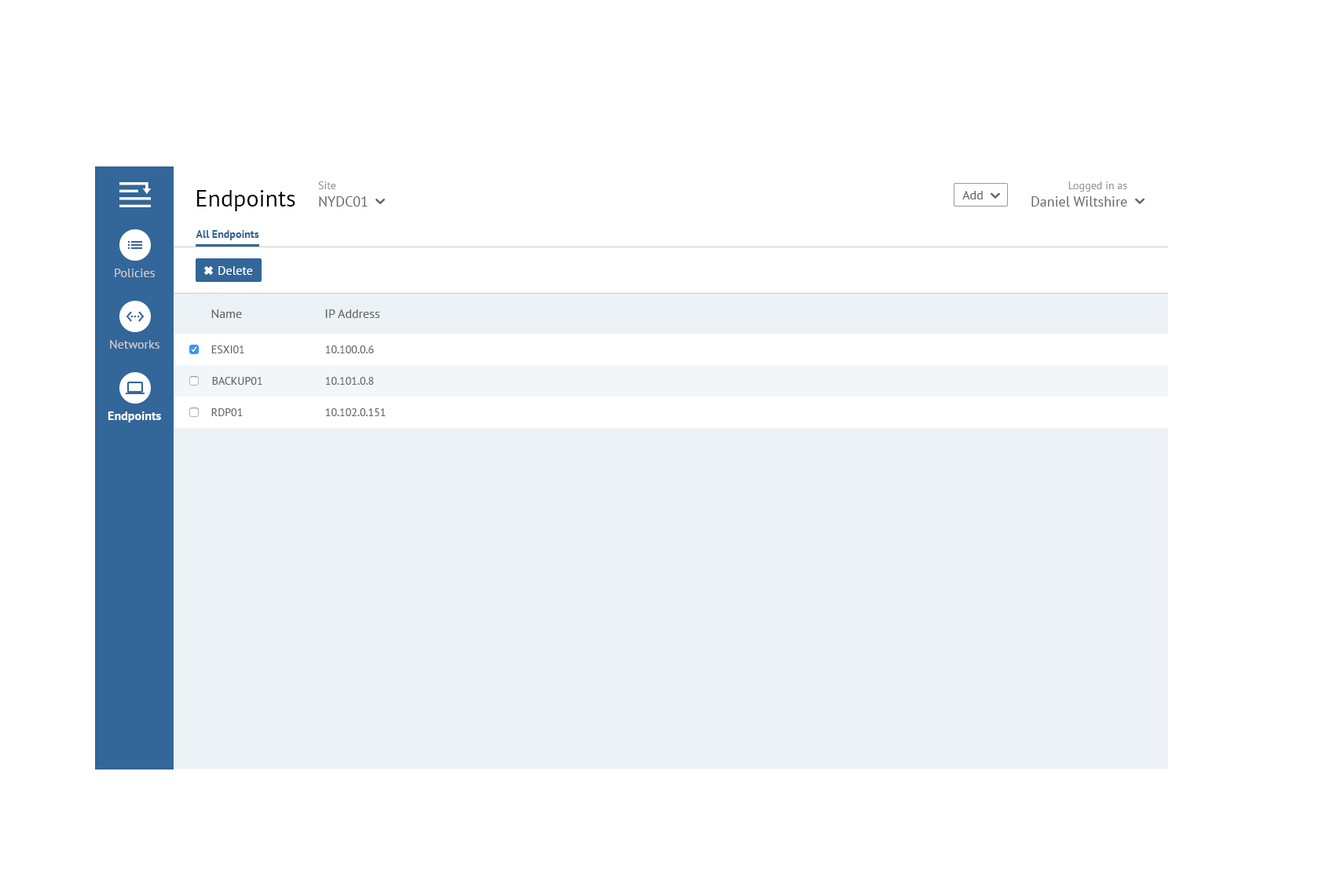
<style>
.page{position:relative;width:1337px;height:892px;background:#ffffff}
.page>*{position:absolute;margin:0}
.t1{font:14.1px "PTSans-Regular";color:#666666}
.t2{font:11px "PTSans-Regular";color:#999999}
.t3{font:14.3px "PTSans-Regular";color:#666666}
.t4{font:11.1px "PTSans-Regular";color:#999999}
.t5{font:23.6px "PTSans-Regular";color:#000000}
.t6{font:12.6px "PTSans-Regular";color:#666666}
.t7{font:10.9px "PTSans-Bold";color:#336699}
.t8{font:12.6px "PTSans-Regular";color:#cccccc}
.t9{font:12.6px "PTSans-Regular";color:#ffffff}
.t10{font:11px "PTSans-Regular";color:#666666}
.t11{font:12.6px "PTSans-Bold";color:#ffffff}
</style>
<div class="page">
<p class="t1" style="left:318px;top:181px;width:50px;height:26px"><span class="t2">Site<br></span>NYDC01</p>
<p class="t3" style="left:1031px;top:181px;width:96px;height:26px;text-align:right"><span class="t4">Logged in as<br></span>Daniel Wiltshire</p>
<p class="t5" style="left:197px;top:190px;width:98px;height:21px">Endpoints</p>
<p class="t6" style="left:962px;top:191px;width:20px;height:8px">Add</p>
<p class="t7" style="left:196px;top:230px;width:63px;height:10px">All Endpoints</p>
<p class="t8" style="left:115px;top:269px;width:40px;height:8px">Policies</p>
<p class="t9" style="left:218px;top:266px;width:35px;height:9px">Delete</p>
<p class="t6" style="left:211px;top:309px;width:31px;height:9px">Name</p>
<p class="t6" style="left:325px;top:309px;width:55px;height:9px">IP Address</p>
<p class="t8" style="left:110px;top:340px;width:49px;height:9px">Networks</p>
<p class="t10" style="left:211px;top:346px;width:33px;height:7px">ESXI01</p>
<p class="t10" style="left:325px;top:346px;width:49px;height:7px">10.100.0.6</p>
<p class="t10" style="left:212px;top:377px;width:50px;height:8px">BACKUP01</p>
<p class="t10" style="left:325px;top:377px;width:49px;height:8px">10.101.0.8</p>
<p class="t11" style="left:108px;top:412px;width:53px;height:11px">Endpoints</p>
<p class="t10" style="left:211px;top:408px;width:32px;height:8px">RDP01</p>
<p class="t10" style="left:325px;top:408px;width:61px;height:8px">10.102.0.151</p>
</div>
